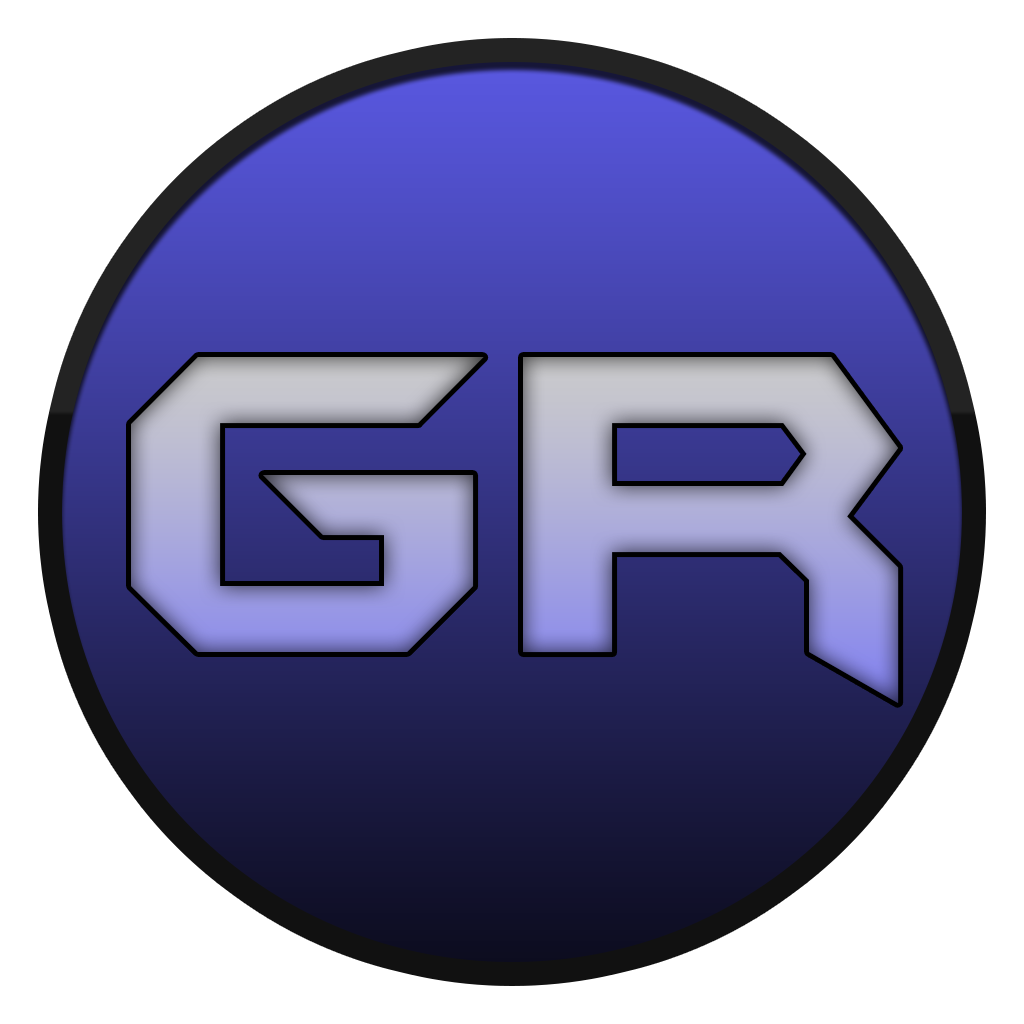
<style>
.page{position:relative;width:1024px;height:1024px;background:#ffffff}
.page>*{position:absolute;margin:0}
.t1{font:500px "BatmanForeverAlternate";letter-spacing:-0.03em}
</style>
<div class="page">
<p class="t1" style="left:131px;top:357px;width:768px;height:346px">gr</p>
</div>
